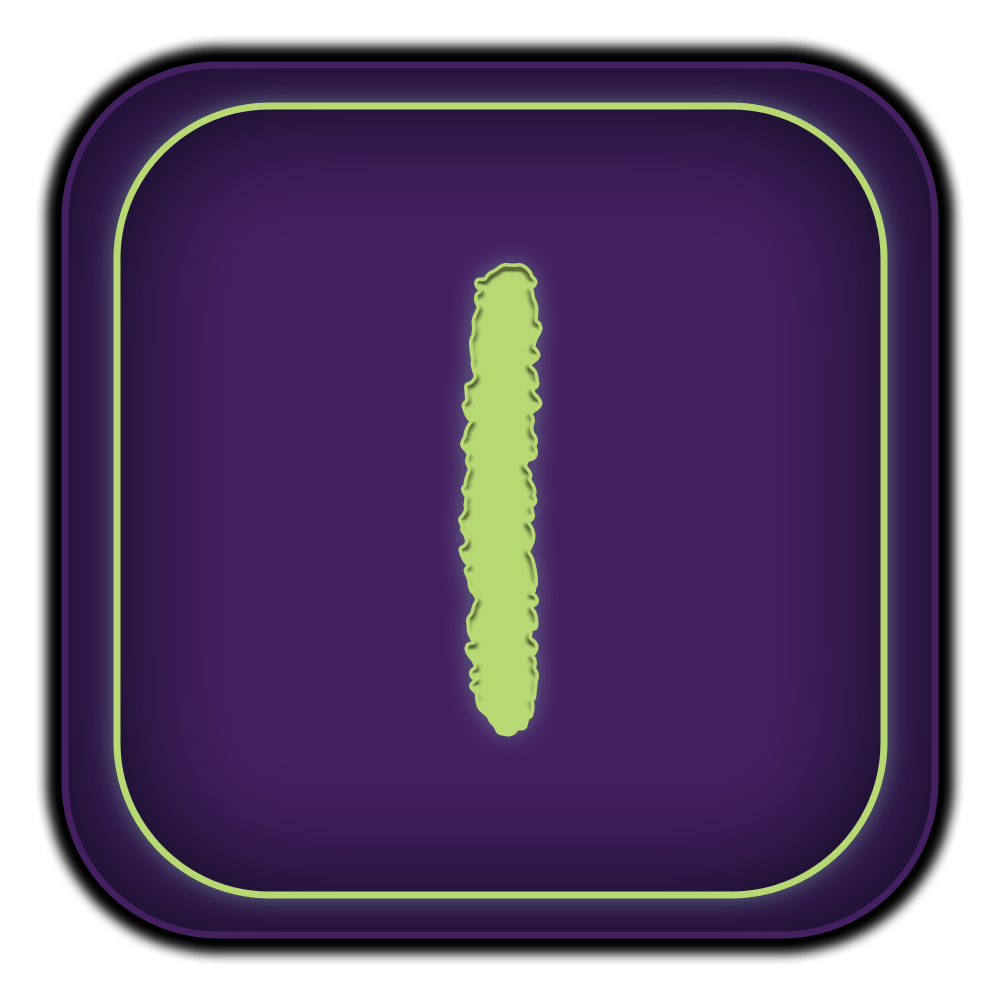
<style>
.page{position:relative;width:1000px;height:1000px;background:#452060}
.page>*{position:absolute;margin:0}
.t1{font:500px "Metalien";letter-spacing:0.1em;color:#b7d974}
</style>
<div class="page">
<p class="t1" style="left:461px;top:266px;width:78px;height:467px">1</p>
</div>
